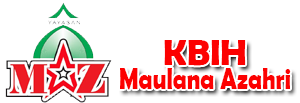
<style>
.page{position:relative;width:300px;height:103px;background:#ffffff}
.page>*{position:absolute;margin:0}
.t1{font:36px "BerlinSansFBDemi-Bold";color:#fc0101}
.t2{font:30.6px "BerlinSansFBDemi-Bold";color:#fc0101;scale:0.78 1}
</style>
<div class="page">
<p class="t1" style="left:164px;top:40px;width:82px;height:26px">KBIH</p>
<p class="t2" style="left:120px;top:68px;width:171px;height:22px">Maulana Azahri</p>
</div>
